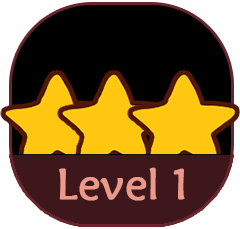
<style>
.page{position:relative;width:240px;height:229px;background:#000000}
.page>*{position:absolute;margin:0}
.t1{font:43.4px "STXinwei";color:#eb9a89;font-weight:bold}
</style>
<div class="page">
<p class="t1" style="left:59px;top:167px;width:126px;height:34px">Level 1</p>
</div>
